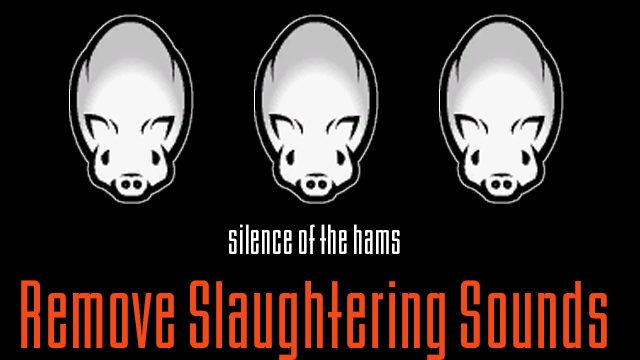
<style>
.page{position:relative;width:640px;height:360px;background:#000000}
.page>*{position:absolute;margin:0}
.t1{font:35px "OPTIBinderStyle-Light";color:#ffffff}
.t2{font:80px "OPTIBinderStyle-Light";color:#f24a18}
</style>
<div class="page">
<p class="t1" style="left:229px;top:224px;width:171px;height:30px">silence of the hams</p>
<p class="t2" style="left:21px;top:280px;width:586px;height:80px">Remove Slaughtering Sounds</p>
</div>
